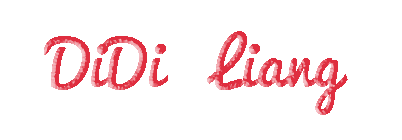
<style>
.page{position:relative;width:402px;height:140px;background:#ffffff}
.page>*{position:absolute;margin:0}
.t1{font:61px "Pacifico"}
</style>
<div class="page">
<p class="t1" style="left:44px;top:31px;width:304px;height:84px">DiDi   Liang</p>
</div>
